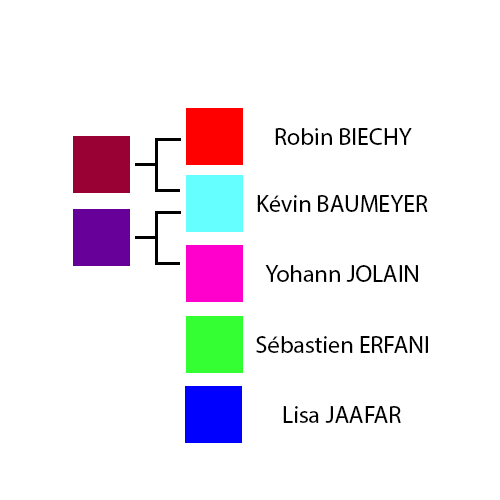
<style>
.page{position:relative;width:500px;height:500px;background:#ffffff}
.page>*{position:absolute;margin:0}
.t1{font:24px "MyriadPro-Regular";color:#000000}
</style>
<div class="page">
<p class="t1" style="left:275px;top:128px;width:137px;height:17px">Robin BIECHY</p>
<p class="t1" style="left:257px;top:195px;width:171px;height:17px">Kévin BAUMEYER</p>
<p class="t1" style="left:265px;top:265px;width:153px;height:17px">Yohann JOLAIN</p>
<p class="t1" style="left:256px;top:336px;width:172px;height:17px">Sébastien ERFANI</p>
<p class="t1" style="left:283px;top:406px;width:118px;height:17px">Lisa JAAFAR</p>
</div>
